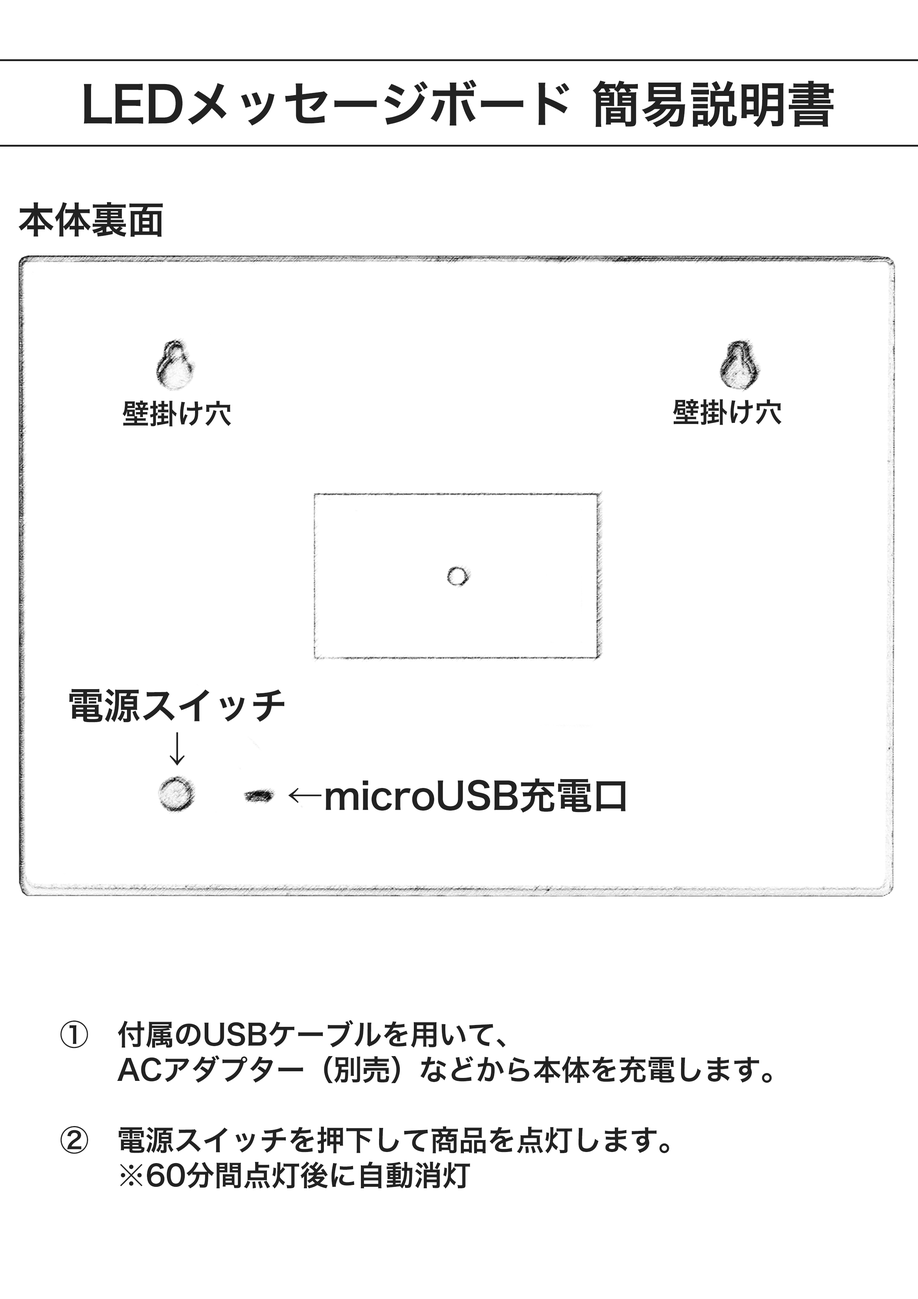
<style>
.page{position:relative;width:918px;height:1299px;background:#ffffff}
.page>*{position:absolute;margin:0}
.t1{font:49.4px "HiraginoKaku-W6-90msp-RKSJ-H";letter-spacing:-0.01em;color:#222222}
.t2{font:37px "HiraginoKaku-W6-90msp-RKSJ-H";letter-spacing:-0.01em;color:#222222}
.t3{font:27.8px "HiraginoKaku-W6-90msp-RKSJ-H";letter-spacing:-0.01em;color:#222222}
.t4{font:37px/43.2px "HiraginoKaku-W6-90msp-RKSJ-H";letter-spacing:-0.01em;color:#222222}
.t5{font:28.8px/35.2px "HiraginoKaku-W6-90msp-RKSJ-H";letter-spacing:-0.01em;color:#222222}
</style>
<div class="page">
<p class="t1" style="left:84px;top:80px;width:750px;height:47px">LEDメッセージボード 簡易説明書</p>
<p class="t2" style="left:19px;top:202px;width:144px;height:35px">本体裏面</p>
<p class="t3" style="left:123px;top:400px;width:108px;height:26px">壁掛け穴</p>
<p class="t3" style="left:673px;top:399px;width:109px;height:26px">壁掛け穴</p>
<p class="t4" style="left:69px;top:689px;width:215px;height:77px;text-align:center">電源スイッチ<br>↓</p>
<p class="t2" style="left:288px;top:778px;width:338px;height:35px">←microUSB充電口</p>
<p class="t5" style="left:60px;top:1020px;width:712px;height:168px">①　付属のUSBケーブルを用いて、<br>　　ACアダプター（別売）などから本体を充電します。<br><br>②　電源スイッチを押下して商品を点灯します。<br>　　※60分間点灯後に自動消灯</p>
</div>
